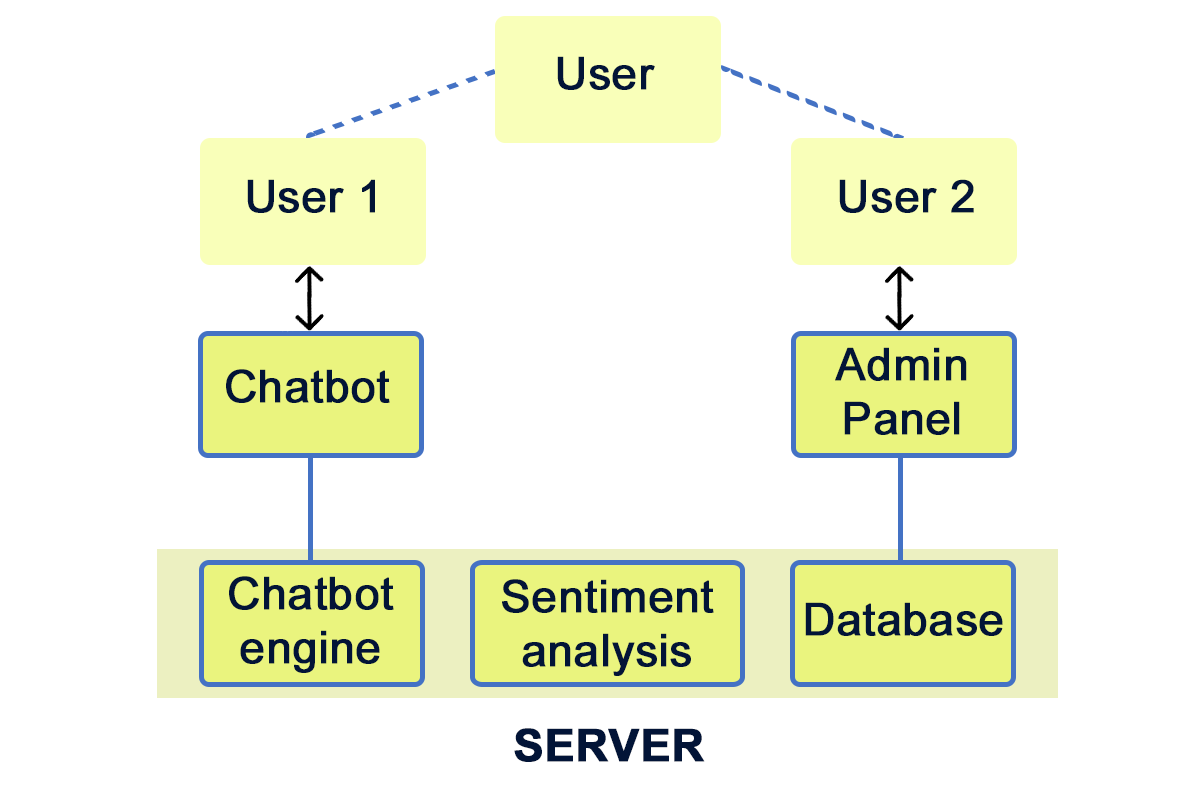
<style>
.page{position:relative;width:1200px;height:800px;background:#ffffff}
.page>*{position:absolute;margin:0}
.t1{font:45px "ArialMT";color:#021437;font-weight:bold}
.t2{font:45px "Arial-BoldMT";color:#021437;font-weight:bold}
</style>
<div class="page">
<p class="t1" style="left:557px;top:56px;width:98px;height:34px">User</p>
<p class="t1" style="left:247px;top:179px;width:128px;height:34px">User 1</p>
<p class="t1" style="left:839px;top:179px;width:135px;height:34px">User 2</p>
<p class="t1" style="left:835px;top:347px;width:132px;height:88px;text-align:center">Admin   Panel</p>
<p class="t1" style="left:226px;top:369px;width:164px;height:34px">Chatbot</p>
<p class="t1" style="left:229px;top:576px;width:165px;height:97px;text-align:center">Chatbot<br>engine</p>
<p class="t1" style="left:502px;top:579px;width:212px;height:97px;text-align:center">Sentiment<br>analysis</p>
<p class="t1" style="left:805px;top:602px;width:198px;height:34px">Database</p>
<p class="t2" style="left:514px;top:728px;width:191px;height:34px">SERVER</p>
</div>
